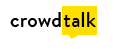
<style>
.page{position:relative;width:114px;height:51px;background:#ffffff}
.page>*{position:absolute;margin:0}
.t1{font:22.2px "BrandonGrotesque-Medium";letter-spacing:0.01em;color:#000000}
</style>
<div class="page">
<p class="t1" style="left:10px;top:12px;width:51px;height:15px">crowd</p>
<p class="t1" style="left:63px;top:12px;width:33px;height:15px">talk</p>
</div>
